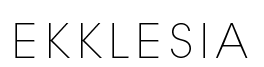
<style>
.page{position:relative;width:264px;height:67px;background:#ffffff}
.page>*{position:absolute;margin:0}
.t1{font:45.8px "ITCAvantGardeStd-XLt";letter-spacing:0.16em;color:#000000}
</style>
<div class="page">
<p class="t1" style="left:15px;top:23px;width:233px;height:35px">EKKLESIA</p>
</div>
